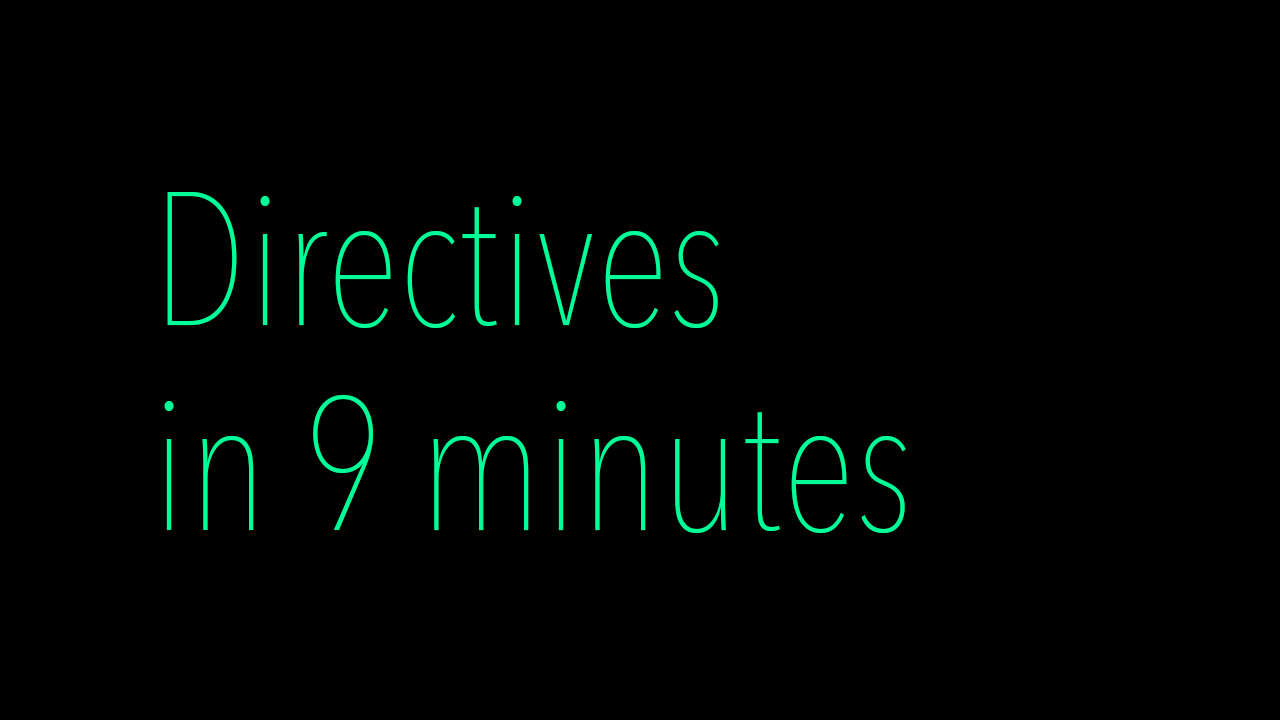
<style>
.page{position:relative;width:1280px;height:720px;background:#000000}
.page>*{position:absolute;margin:0}
.t1{font:187.5px "AvenirNextCondensed-UltraLight";color:#00ff99}
</style>
<div class="page">
<p class="t1" style="left:164px;top:192px;width:742px;height:341px">Directives <br>in 9 minutes</p>
</div>
